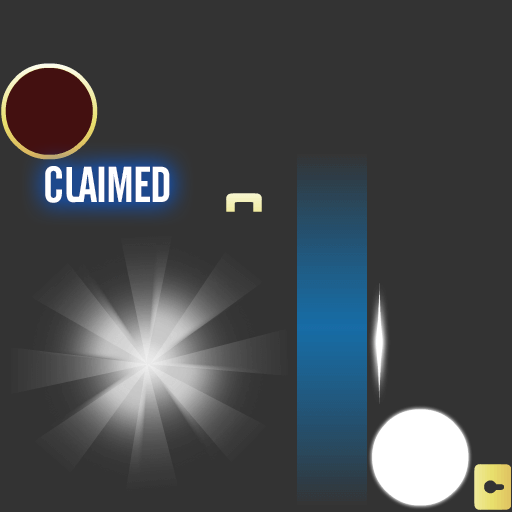
<style>
.page{position:relative;width:512px;height:512px;background:#333333}
.page>*{position:absolute;margin:0}
.t1{font:50px "UTM-Cafeta";letter-spacing:-0.025em;color:#ffffff;text-transform:uppercase}
</style>
<div class="page">
<p class="t1" style="left:45px;top:166px;width:125px;height:37px">claimed</p>
</div>
